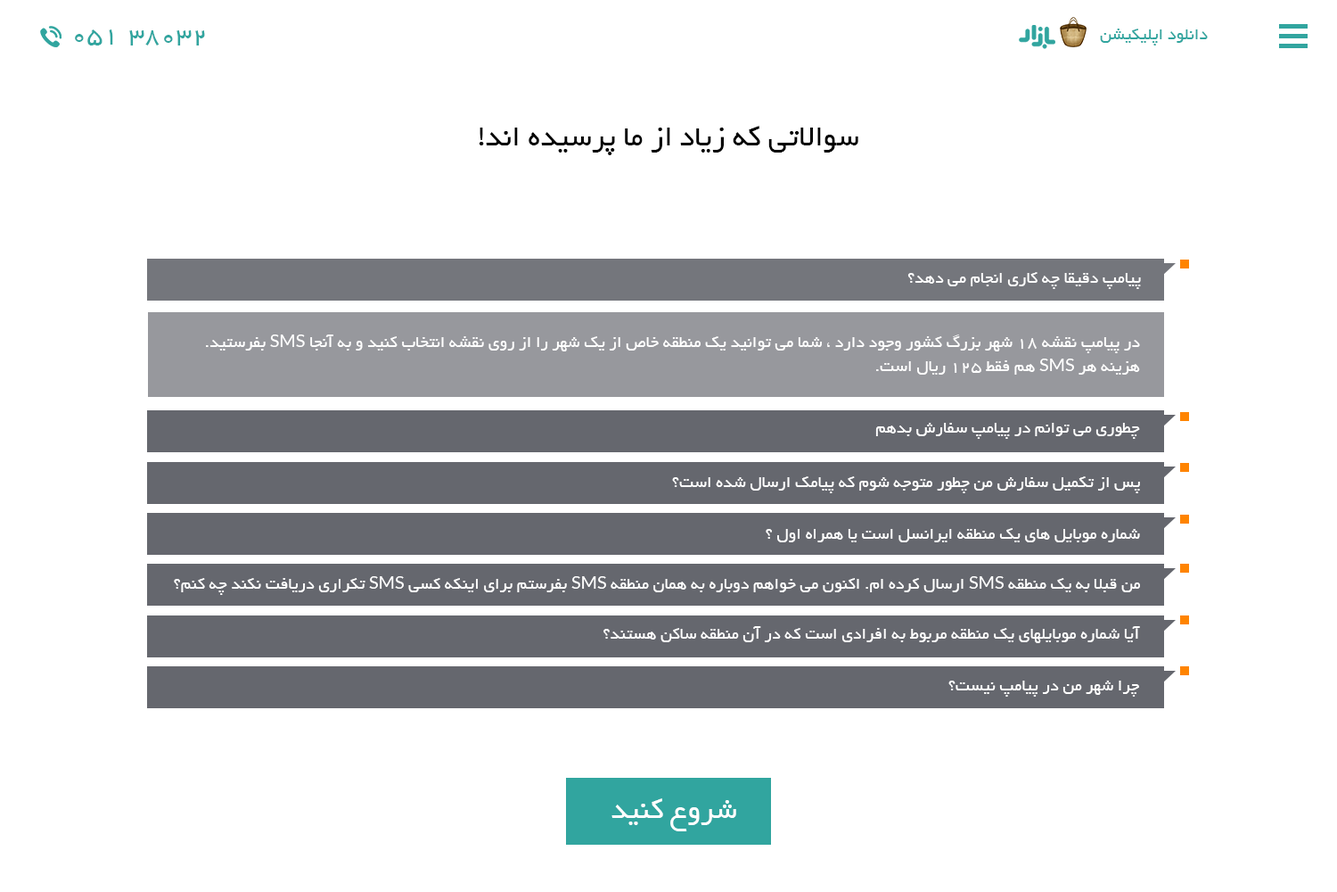
<style>
.page{position:relative;width:1337px;height:892px;background:#ffffff}
.page>*{position:absolute;margin:0}
.t1{font:26.7px "BYekan";color:#31a59f}
.t2{font:18px "BYekan";color:#31a59f}
.t3{font:31.2px "BYekan";color:#000000}
.t4{font:17.8px "BYekan";color:#ffffff}
.t5{font:17.8px/24.1px "BYekan";color:#ffffff}
.t6{font:17.8px/24.1px "Lato-Regular";color:#ffffff}
.t7{font:17.8px "Lato-Regular";color:#ffffff}
.t8{font:31.2px "BYekan";color:#ffffff}
</style>
<div class="page">
<p class="t1" style="left:75px;top:29px;width:38px;height:16px">051</p>
<p class="t2" style="left:1100px;top:29px;width:108px;height:16px">دانلود اپلیکیشن</p>
<p class="t1" style="left:129px;top:30px;width:76px;height:15px">38032</p>
<p class="t3" style="left:479px;top:126px;width:380px;height:29px">سوالاتی که زیاد از ما پرسیده اند!</p>
<p class="t4" style="left:908px;top:272px;width:233px;height:17px">پیامپ دقیقا چه کاری انجام می دهد؟</p>
<p class="t5" style="left:206px;top:334px;width:934px;height:40px">در پیامپ نقشه 18 شهر بزرگ کشور وجود دارد ، شما می توانید یک منطقه خاص از یک شهر را از روی نقشه انتخاب کنید و به آنجا <span class="t6">SMS</span> بفرستید. هزینه هر <span class="t6">SMS</span> هم فقط 125 ریال است.</p>
<p class="t4" style="left:876px;top:423px;width:264px;height:16px">چطوری می توانم در پیامپ سفارش بدهم</p>
<p class="t4" style="left:672px;top:476px;width:468px;height:17px">پس از تکمیل سفارش من چطور متوجه شوم که پیامک ارسال شده است؟</p>
<p class="t4" style="left:766px;top:528px;width:374px;height:14px">شماره موبایل های یک منطقه ایرانسل است یا همراه اول ؟</p>
<p class="t4" style="left:174px;top:576px;width:966px;height:19px">من قبلا به یک منطقه <span class="t7">SMS</span> ارسال کرده ام. اکنون می خواهم دوباره به همان منطقه <span class="t7">SMS</span> بفرستم برای اینکه کسی <span class="t7">SMS</span> تکراری دریافت نکند چه کنم؟</p>
<p class="t4" style="left:604px;top:626px;width:536px;height:17px">آیا شماره موبایلهای یک منطقه مربوط به افرادی است که در آن منطقه ساکن هستند؟</p>
<p class="t4" style="left:949px;top:680px;width:190px;height:16px">چرا شهر من در پیامپ نیست؟</p>
<p class="t8" style="left:612px;top:798px;width:124px;height:33px">شروع کنید</p>
</div>
